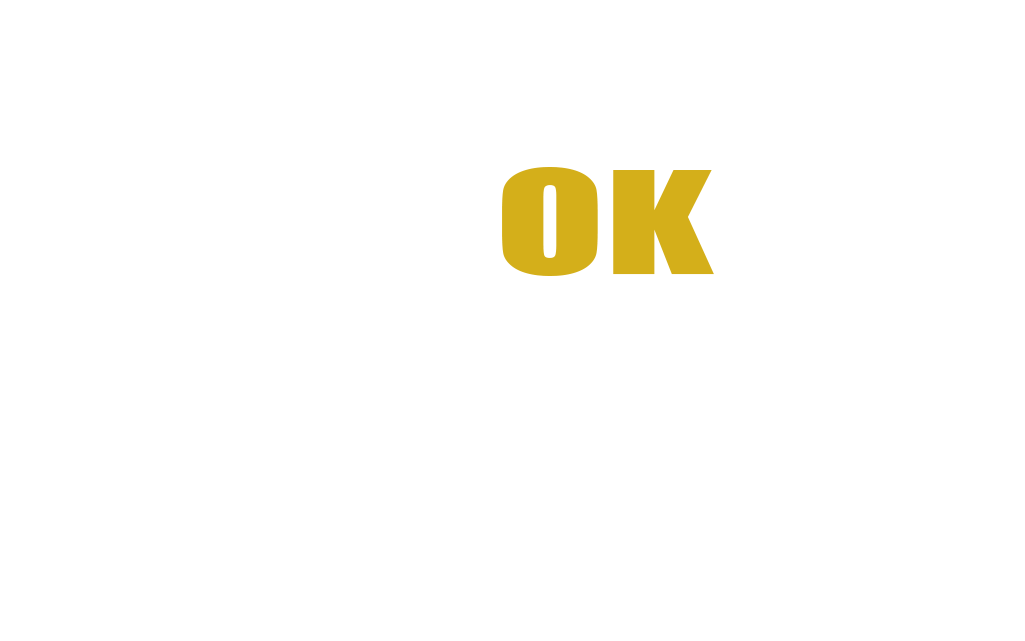
<style>
.page{position:relative;width:1025px;height:641px;background:#ffffff}
.page>*{position:absolute;margin:0}
.t1{font:226.4px "Impact";color:#d4af1a;font-variant:small-caps;scale:1.52 1}
.t2{font:169.8px "SegoeScript-Bold";color:#036c6f;font-variant:small-caps;scale:1.52 1}
</style>
<div class="page">
<p class="t1" style="left:502px;top:167px;width:212px;height:109px"><span class="t2">    </span>OK</p>
</div>
